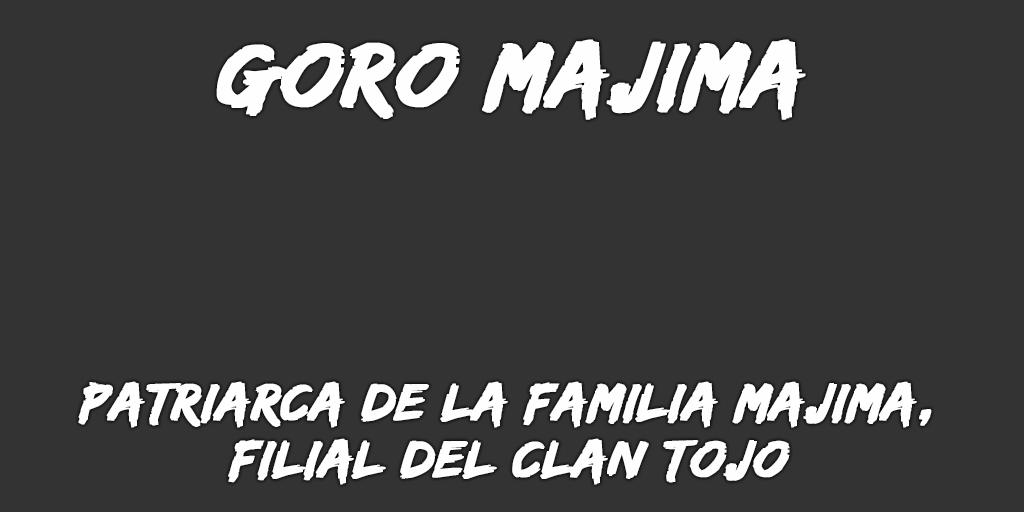
<style>
.page{position:relative;width:1024px;height:512px;background:#333333}
.page>*{position:absolute;margin:0}
.t1{font:95px "EdoSZ";color:#fefefe;font-weight:bold;font-style:italic;scale:1.04 1}
.t2{font:54px/57px "EdoSZ";color:#fefefe;font-weight:bold;font-style:italic;scale:1.04 1}
</style>
<div class="page">
<p class="t1" style="left:216px;top:39px;width:590px;height:81px">goro majima</p>
<p class="t2" style="left:78px;top:381px;width:854px;height:104px;text-align:center">patriarca de la familia mAJIMA,<br>FILIAL DEL CLAN TOJO</p>
</div>
